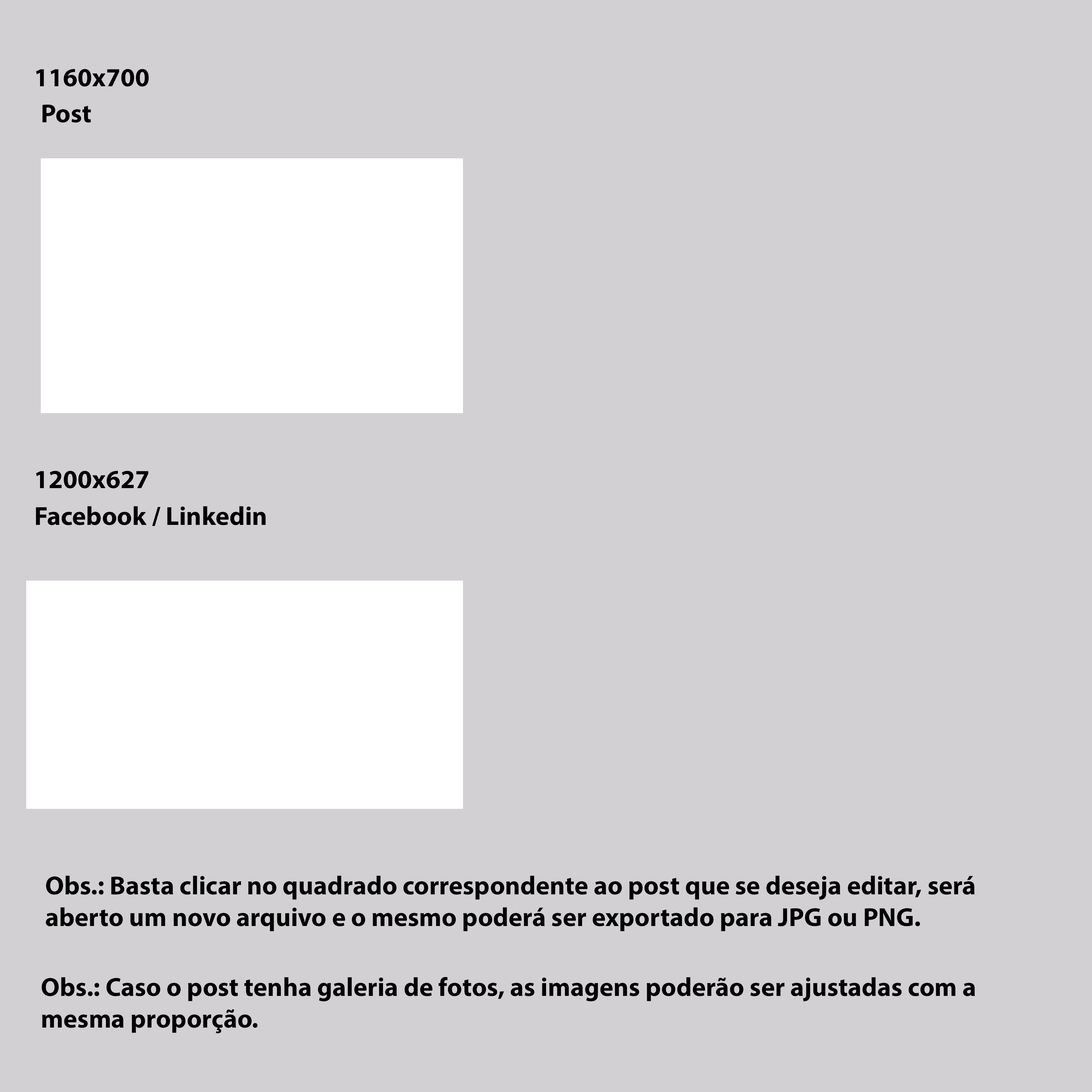
<style>
.page{position:relative;width:1092px;height:1092px;background:#d2d0d3}
.page>*{position:absolute;margin:0}
.t1{font:26.2px "MyriadPro-Bold";color:#000000}
</style>
<div class="page">
<p class="t1" style="left:36px;top:69px;width:113px;height:18px">1160x700</p>
<p class="t1" style="left:42px;top:104px;width:49px;height:19px">Post</p>
<p class="t1" style="left:36px;top:471px;width:113px;height:17px">1200x627</p>
<p class="t1" style="left:36px;top:506px;width:230px;height:20px">Facebook / Linkedin</p>
<p class="t1" style="left:46px;top:875px;width:929px;height:56px">Obs.: Basta clicar no quadrado correspondente ao post que se deseja editar, será aberto um novo arquivo e o mesmo poderá ser exportado para JPG ou PNG.</p>
<p class="t1" style="left:41px;top:977px;width:934px;height:56px">Obs.: Caso o post tenha galeria de fotos, as imagens poderão ser ajustadas com a mesma proporção.</p>
</div>
